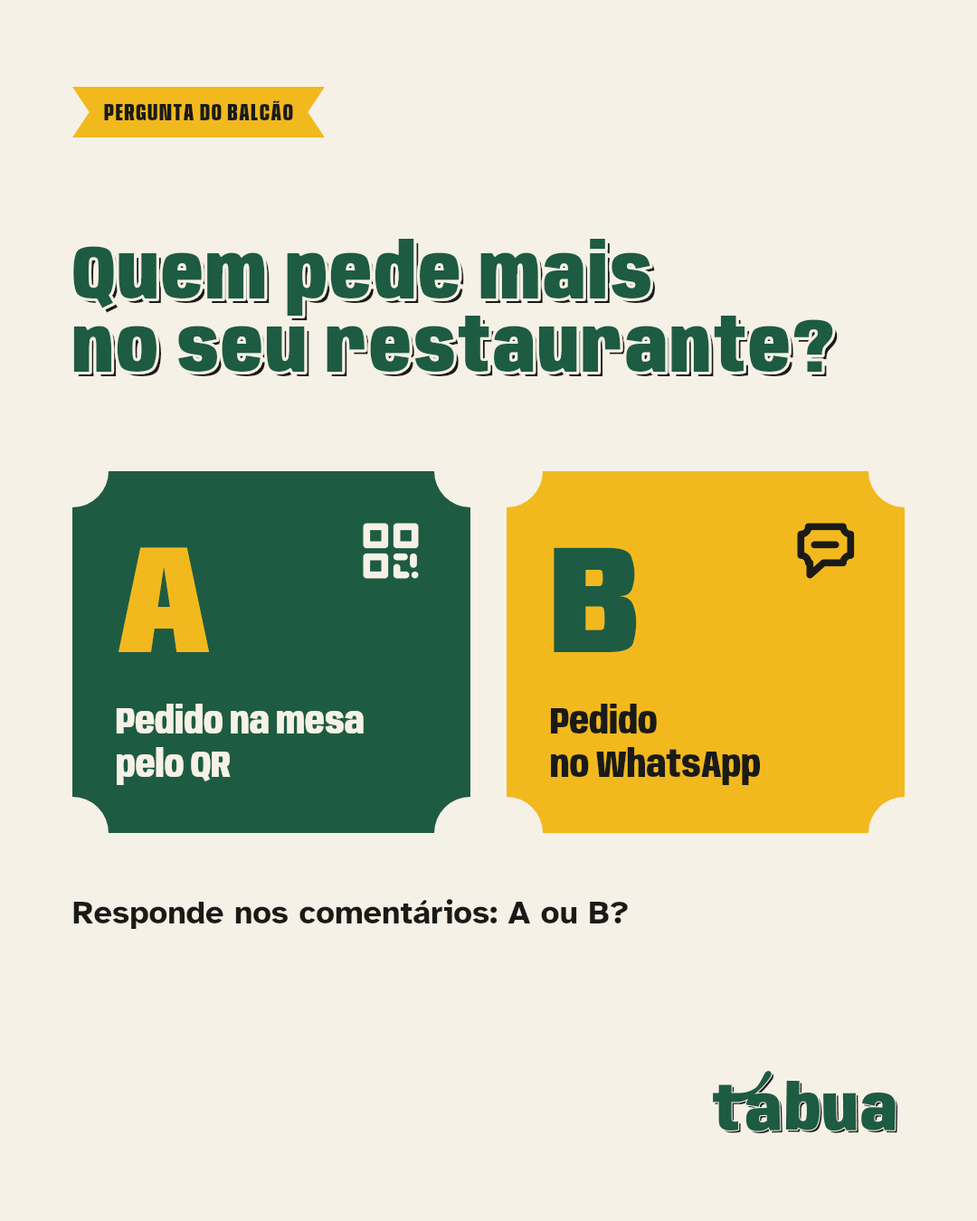
<style>
.page{position:relative;width:977px;height:1221px;background:#f6f1e6}
.page>*{position:absolute;margin:0}
.t1{font:24.4px "Anybody-ExtraBold-W60";letter-spacing:0.06em;color:#1a1a17}
.t2{font:76px/73.3px "Anybody-Black-W75";letter-spacing:0.034em;color:#1e5b43}
.t3{font:76px/73.3px "Anybody-Black-W75";letter-spacing:0.034em}
.t4{font:153.7px "Anybody-Black-W80";color:#f2b91e}
.t5{font:153.7px "Anybody-Black-W80";color:#1e5b43}
.t6{font:38px/43.4px "Anybody-ExtraBold-W75";color:#f6f1e6}
.t7{font:38px/43.4px "Anybody-ExtraBold-W75";color:#1a1a17}
.t8{font:32.6px "AtkinsonHyperlegible-Bold";color:#1a1a17}
</style>
<div class="page">
<p class="t1" style="left:104px;top:100px;width:189px;height:20px">PERGUNTA DO BALCÃO</p>
<p class="t2" style="left:71px;top:236px;width:765px;height:138px">Quem pede mais<br>no seu restaurante?</p>
<p class="t3" style="left:78px;top:243px;width:759px;height:133px">Quem pede mais<br>no seu restaurante?</p>
<p class="t4" style="left:118px;top:547px;width:92px;height:105px">A</p>
<p class="t5" style="left:553px;top:547px;width:84px;height:105px">B</p>
<p class="t6" style="left:116px;top:704px;width:248px;height:81px">Pedido na mesa<br>pelo QR</p>
<p class="t7" style="left:550px;top:704px;width:211px;height:81px">Pedido<br>no WhatsApp</p>
<p class="t8" style="left:73px;top:899px;width:555px;height:30px">Responde nos comentários: A ou B?</p>
</div>
